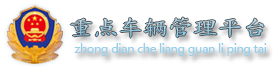
<style>
.page{position:relative;width:274px;height:71px;background:#ffffff}
.page>*{position:absolute;margin:0}
.t1{font:21px "FZKTJW--GB1-0";letter-spacing:-0.02em;color:#a5d7f0;scale:1.21 1}
.t2{font:12px "MicrosoftYaHei";letter-spacing:-0.04em;color:#99cee8}
</style>
<div class="page">
<p class="t1" style="left:70px;top:17px;width:194px;height:21px">重点车辆管理平台</p>
<p class="t2" style="left:74px;top:43px;width:193px;height:13px">zhong dian che liang guan li ping tai</p>
</div>
